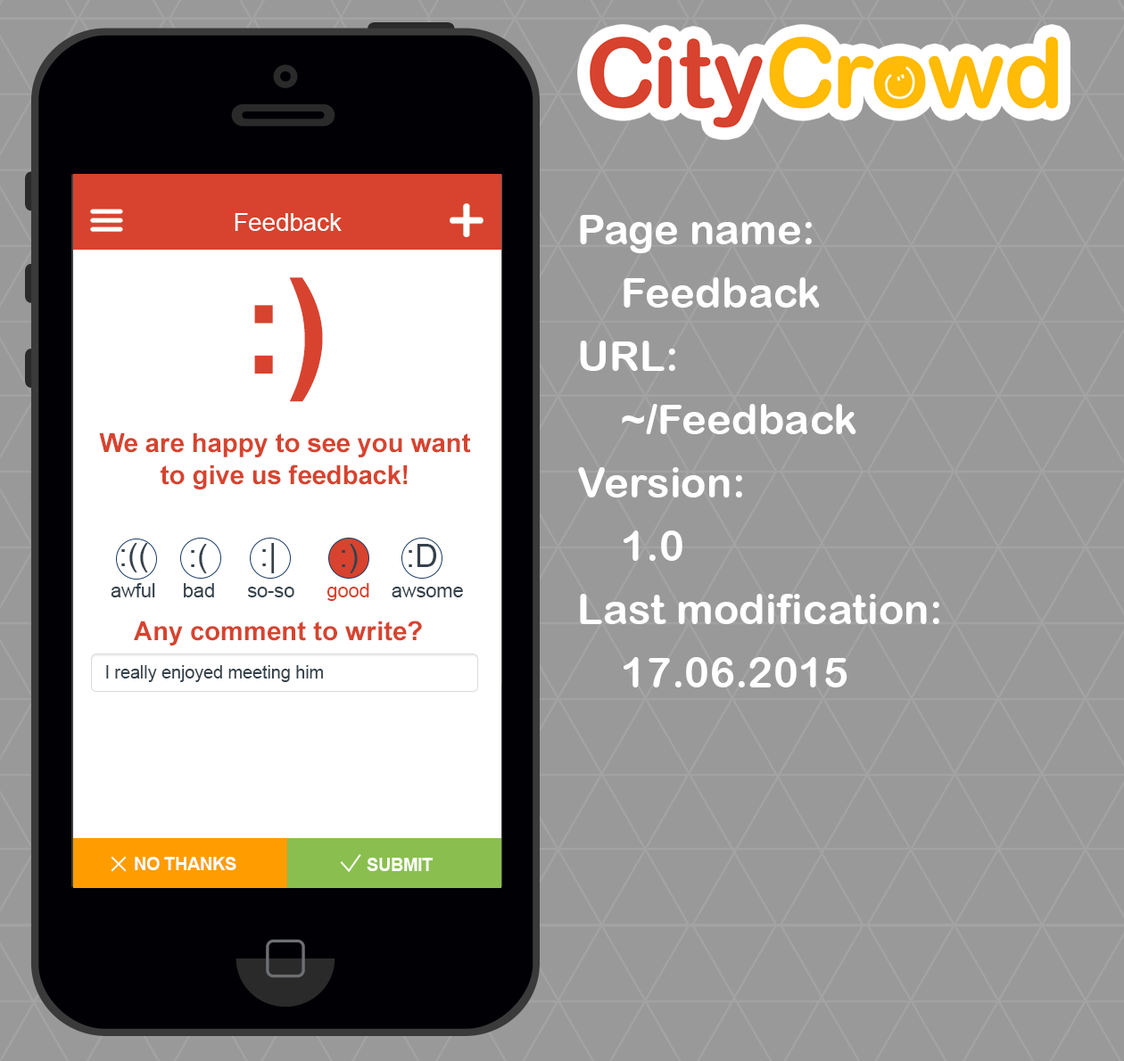
<style>
.page{position:relative;width:1124px;height:1061px;background:#999999}
.page>*{position:absolute;margin:0}
.t1{font:24.6px "ArialMT";color:#ffffff}
.t2{font:42.2px/63.3px "ArialRoundedMTBold";color:#ffffff}
.t3{font:26.4px/79.1px "Arial-BoldMT";color:#d7432e}
.t4{font:131.9px/79.1px "Arial-BoldMT";color:#d7432e}
.t5{font:26.4px "Arial-BoldMT";color:#d7432e}
.t6{font:31.7px "ArialMT";color:#34414b}
.t7{font:19.3px "ArialMT";color:#34414b}
.t8{font:19.3px "ArialMT";color:#d7432e}
.t9{font:17.6px "ArialMT";color:#34414b}
.t10{font:17.6px "Arial-BoldMT";color:#ffffff}
</style>
<div class="page">
<p class="t1" style="left:235px;top:213px;width:107px;height:18px">Feedback</p>
<p class="t2" style="left:578px;top:215px;width:361px;height:473px">Page name:<br>Feedback<br>URL:<br>~/Feedback<br>Version:<br>1.0<br>Last modification:<br>17.06.2015</p>
<p class="t3" style="left:99px;top:277px;width:372px;height:213px;text-align:center"><span class="t4">:)<br></span>We are happy to see you want<br><span class="t5">to give us feedback!</span></p>
<p class="t6" style="left:121px;top:543px;width:27px;height:30px">:((</p>
<p class="t6" style="left:191px;top:544px;width:16px;height:29px">:(</p>
<p class="t6" style="left:262px;top:543px;width:12px;height:30px">:|</p>
<p class="t6" style="left:342px;top:544px;width:16px;height:29px">:)</p>
<p class="t6" style="left:408px;top:544px;width:29px;height:23px">:D</p>
<p class="t7" style="left:111px;top:583px;width:352px;height:18px">awful     bad      so-so      <span class="t8">good    </span>awsome</p>
<p class="t5" style="left:134px;top:621px;width:288px;height:25px">Any comment to write?</p>
<p class="t9" style="left:106px;top:665px;width:217px;height:17px">I really enjoyed meeting him</p>
<p class="t10" style="left:135px;top:857px;width:101px;height:13px">NO THANKS</p>
<p class="t10" style="left:367px;top:858px;width:66px;height:13px">SUBMIT</p>
</div>
